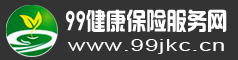
<style>
.page{position:relative;width:238px;height:60px;background:#333333}
.page>*{position:absolute;margin:0}
.t1{font:24px "¹ã½Ý¾ÓÃÔÄã×Ö¿â";color:#ffffff;scale:0.84 1}
.t2{font:15.5px "ArialMT";letter-spacing:0.04em;color:#ffffff;scale:1.54 1}
</style>
<div class="page">
<p class="t1" style="left:65px;top:9px;width:162px;height:23px">99健康保险服务网</p>
<p class="t2" style="left:67px;top:39px;width:157px;height:15px">www.99jkc.cn</p>
</div>
